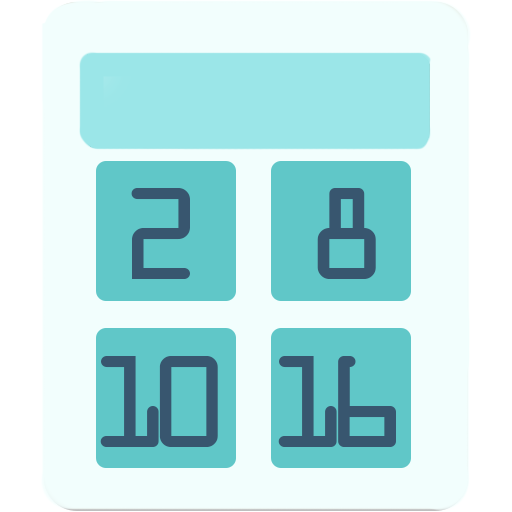
<style>
.page{position:relative;width:512px;height:512px;background:#f2fefd}
.page>*{position:absolute;margin:0}
.t1{font:140px "OCRAExtended";letter-spacing:-0.18em;color:#38566f}
.t2{font:140px "OCRAExtended";letter-spacing:0.06em;color:#000000}
.t3{font:140px "OCRAExtended";letter-spacing:0.06em;color:#38566f}
</style>
<div class="page">
<p class="t1" style="left:100px;top:188px;width:296px;height:259px"><span class="t2"> </span><span class="t3">2 8<br> </span>10 16</p>
</div>
